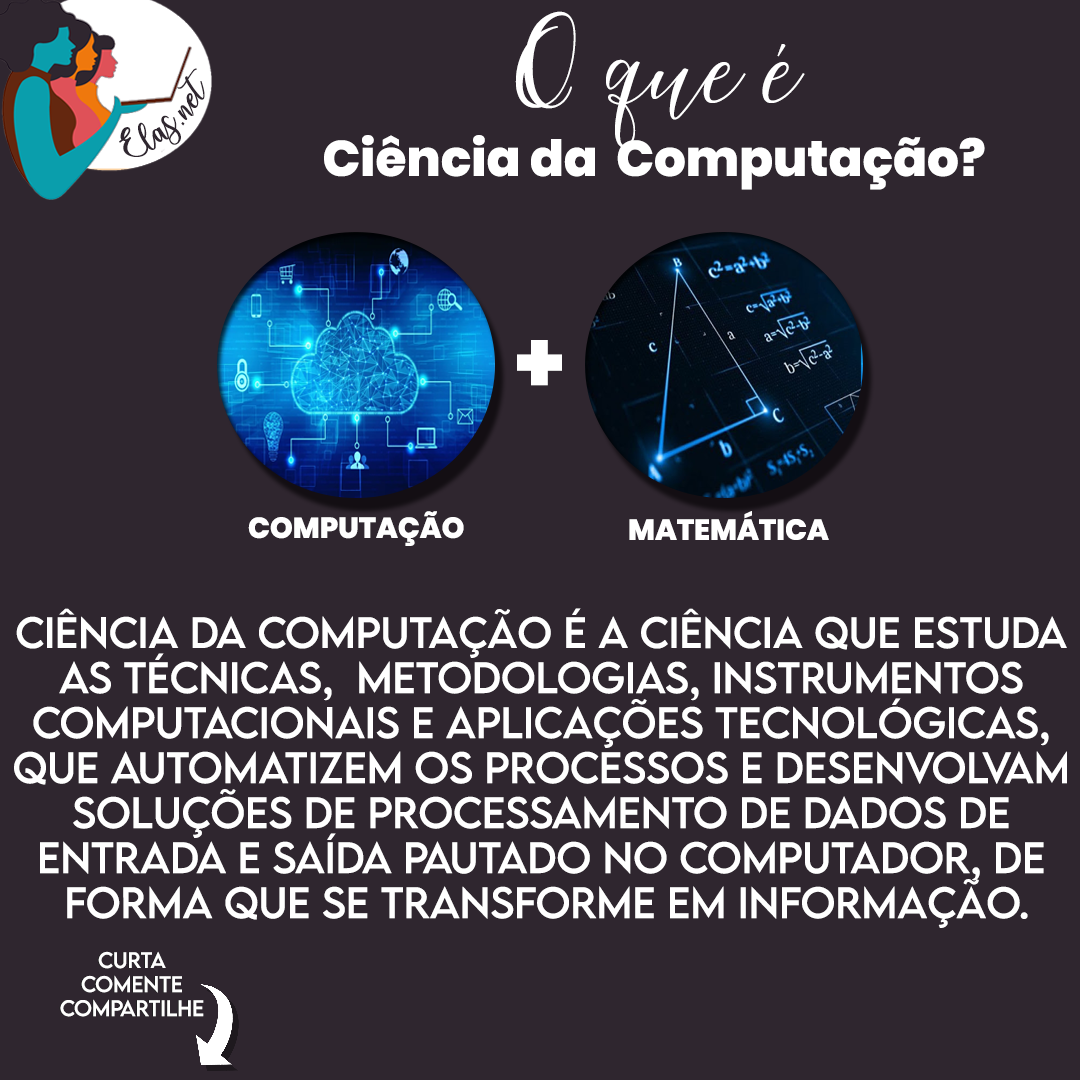
<style>
.page{position:relative;width:1080px;height:1080px;background:#2f262f}
.page>*{position:absolute;margin:0}
.t1{font:50px "Poppins-ExtraBold";color:#ffffff}
.t2{font:142.1px "MaheisaScript";color:#ffffff}
.t3{font:25px "charlinda-Regular";color:#2f262f;scale:1.18 1}
.t4{font:88px "Poppins-ExtraBold";color:#ffffff}
.t5{font:29px "Poppins-ExtraBold";color:#ffffff}
.t6{font:39px/45px "LEMONMILK-Regular";color:#ffffff}
.t7{font:20px "LEMONMILK-Regular"}
.t8{font:20px "LEMONMILK-Regular";color:#ffffff}
</style>
<div class="page">
<p class="t1" style="left:324px;top:11px;width:661px;height:179px;text-align:center"><span class="t2">O que é<br></span>Ciência da  Computação?</p>
<p class="t3" style="left:119px;top:68px;width:86px;height:89px;rotate:-43deg">Elas.net</p>
<p class="t4" style="left:517px;top:340px;width:45px;height:46px">+</p>
<p class="t5" style="left:248px;top:511px;width:216px;height:35px">COMPUTAÇÃO</p>
<p class="t5" style="left:629px;top:511px;width:200px;height:29px">MATEMÁTICA</p>
<p class="t6" style="left:14px;top:608px;width:1053px;height:320px;text-align:center">Ciência da computação é a ciência que estuda <br>as técnicas,  metodologias, instrumentos <br>computacionais e aplicações tecnológicas, <br>que automatizem os processos e desenvolvam <br>soluções de processamento de dados de <br>entrada e saída pautado no computador, de <br>forma que se transforme em informação.</p>
<p class="t7" style="left:59px;top:951px;width:144px;height:66px;text-align:center">Curta<br>Comente<br>Compartilhe</p>
<p class="t8" style="left:60px;top:951px;width:144px;height:66px;text-align:center">Curta<br>Comente<br>Compartilhe</p>
</div>
